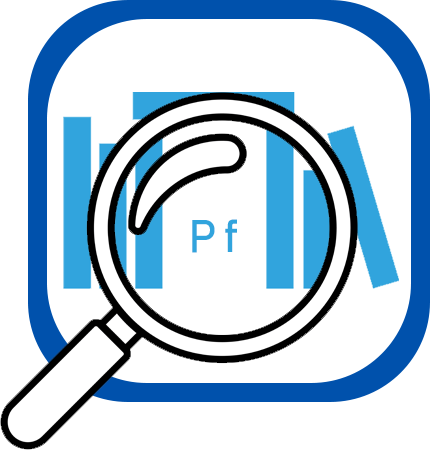
<style>
.page{position:relative;width:430px;height:450px;background:#ffffff}
.page>*{position:absolute;margin:0}
.t1{font:45.8px "Bahnschrift";color:#31a4dd}
</style>
<div class="page">
<p class="t1" style="left:192px;top:220px;width:23px;height:33px">P</p>
<p class="t1" style="left:225px;top:219px;width:12px;height:33px">f</p>
</div>
